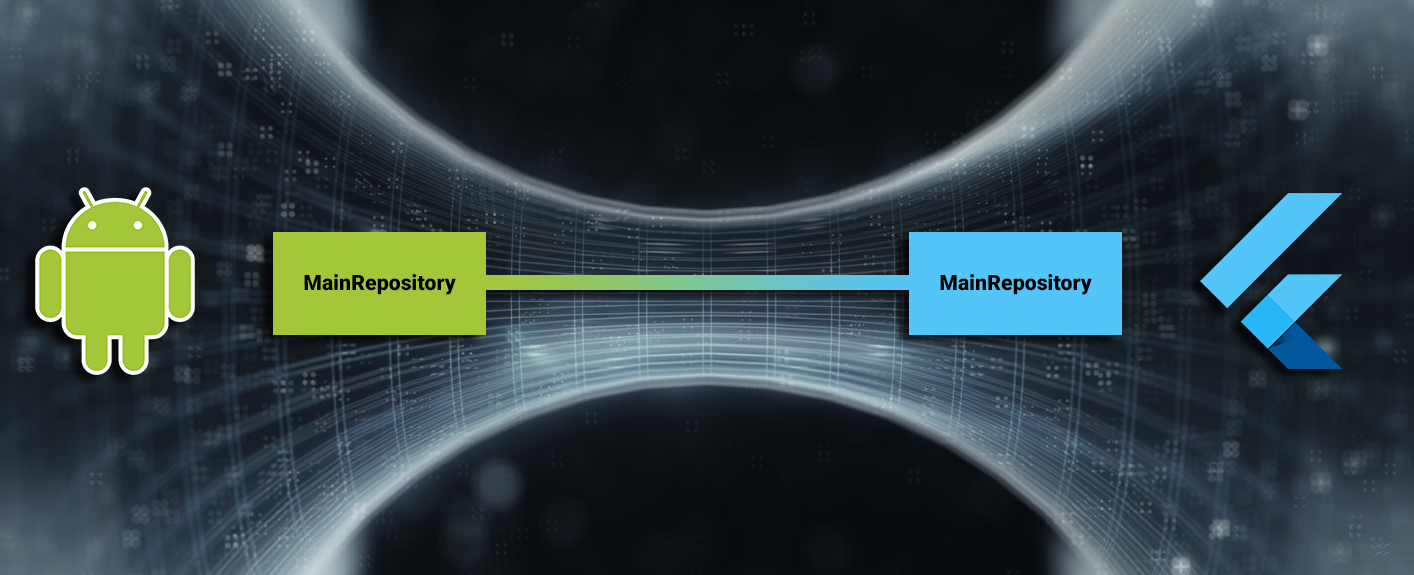
<style>
.page{position:relative;width:1414px;height:575px}
.page>*{position:absolute;margin:0}
.t1{font:21.3px "Roboto-Black";color:#000000}
</style>
<div class="page">
<p class="t1" style="left:304px;top:274px;width:152px;height:21px">MainRepository</p>
<p class="t1" style="left:940px;top:274px;width:152px;height:21px">MainRepository</p>
</div>
